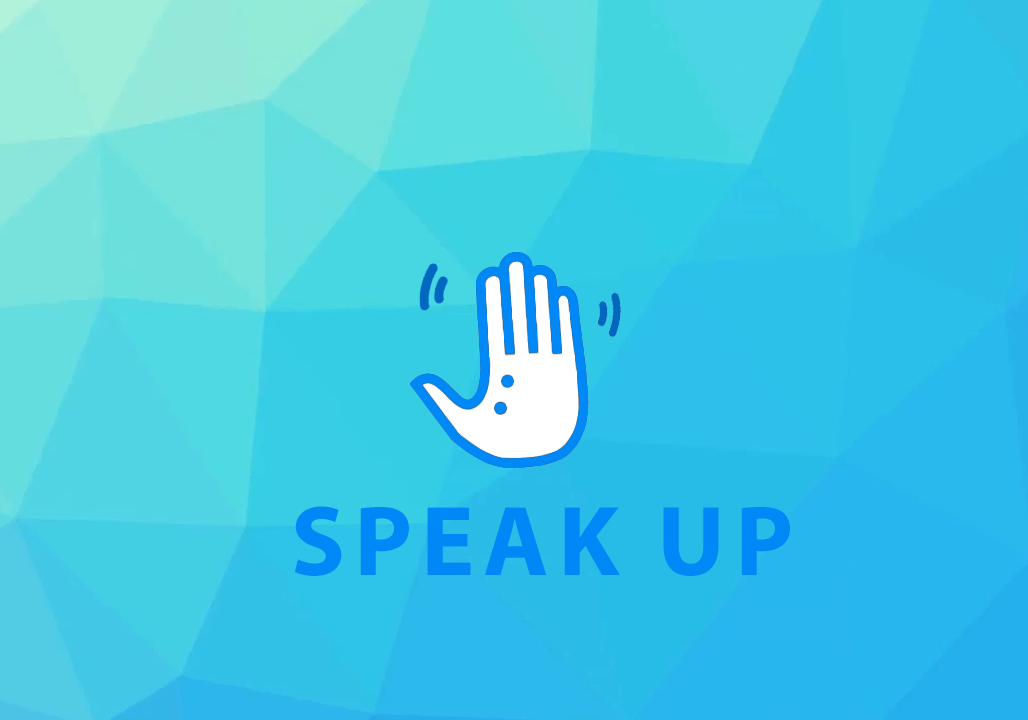
<style>
.page{position:relative;width:1028px;height:720px}
.page>*{position:absolute;margin:0}
.t1{font:100px "MyriadPro-Bold";letter-spacing:0.09em;color:#0088f7;text-transform:uppercase}
</style>
<div class="page">
<p class="t1" style="left:295px;top:506px;width:495px;height:70px">Speak Up</p>
</div>
